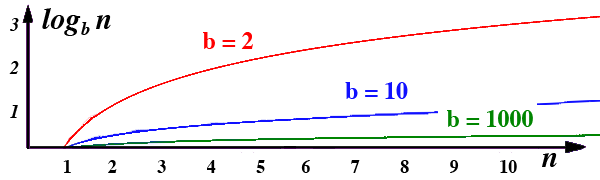
<style>
.page{position:relative;width:600px;height:180px;background:#ffffff}
.page>*{position:absolute;margin:0}
.t1{font:30px "Times-BoldItalic";color:#000000}
.t2{font:18px "Times-BoldItalic";color:#000000}
.t3{font:24px "Times-Bold";color:#ff0000}
.t4{font:24px "Times-Bold";color:#1010ff}
.t5{font:24px "Times-Bold";color:#008500}
.t6{font:18px "Times-Bold";color:#000000}
</style>
<div class="page">
<p class="t1" style="left:42px;top:8px;width:69px;height:28px">log  n</p>
<p class="t2" style="left:9px;top:18px;width:10px;height:100px">3<br><br>2<br><br>1</p>
<p class="t2" style="left:81px;top:22px;width:9px;height:13px">b</p>
<p class="t3" style="left:203px;top:32px;width:50px;height:17px">b = 2</p>
<p class="t4" style="left:345px;top:82px;width:63px;height:17px">b = 10</p>
<p class="t5" style="left:447px;top:110px;width:86px;height:17px">b = 1000</p>
<p class="t6" style="left:63px;top:160px;width:454px;height:13px">1        2         3         4         5        6         7         8         9         10</p>
<p class="t1" style="left:542px;top:153px;width:15px;height:14px">n</p>
</div>
